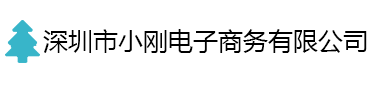
<style>
.page{position:relative;width:370px;height:85px;background:#ffffff}
.page>*{position:absolute;margin:0}
.t1{font:25px "MicrosoftYaHei";color:#000000}
</style>
<div class="page">
<p class="t1" style="left:43px;top:29px;width:324px;height:24px">深圳市小刚电子商务有限公司</p>
</div>
